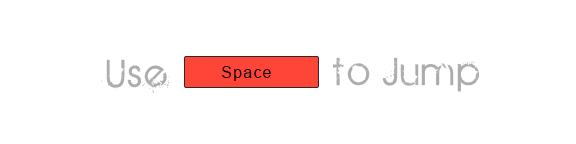
<style>
.page{position:relative;width:576px;height:144px;background:#ffffff}
.page>*{position:absolute;margin:0}
.t1{font:42px "BIRTHOFAHERO";letter-spacing:0.075em;color:#acacac}
.t2{font:16px "ArialMT";letter-spacing:0.075em;color:#010101}
</style>
<div class="page">
<p class="t1" style="left:101px;top:59px;width:69px;height:34px">Use</p>
<p class="t1" style="left:333px;top:57px;width:146px;height:35px">to Jump</p>
<p class="t2" style="left:222px;top:66px;width:49px;height:15px">Space</p>
</div>
